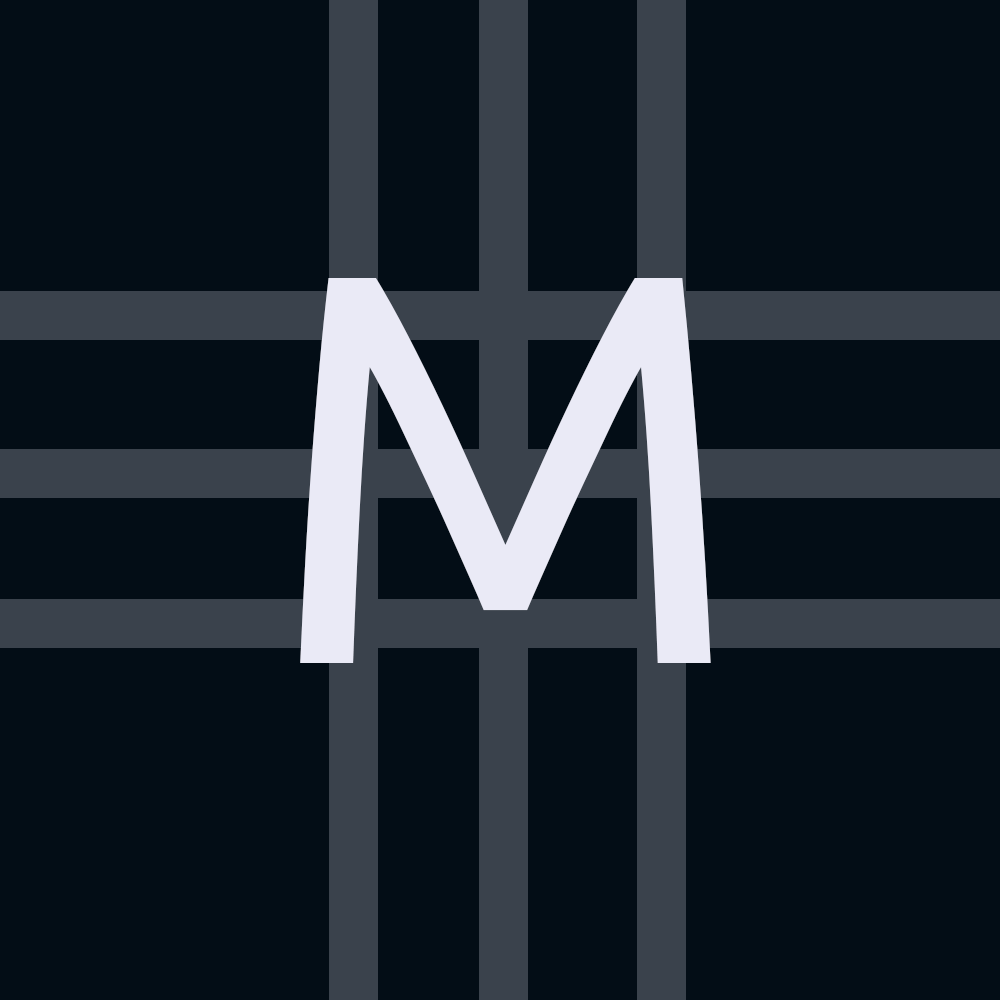
<style>
.page{position:relative;width:1000px;height:1000px;background:#030d16}
.page>*{position:absolute;margin:0}
.t1{font:555.6px "Ubuntu-Regular";color:#eaeaf6}
</style>
<div class="page">
<p class="t1" style="left:300px;top:278px;width:411px;height:385px">M</p>
</div>
